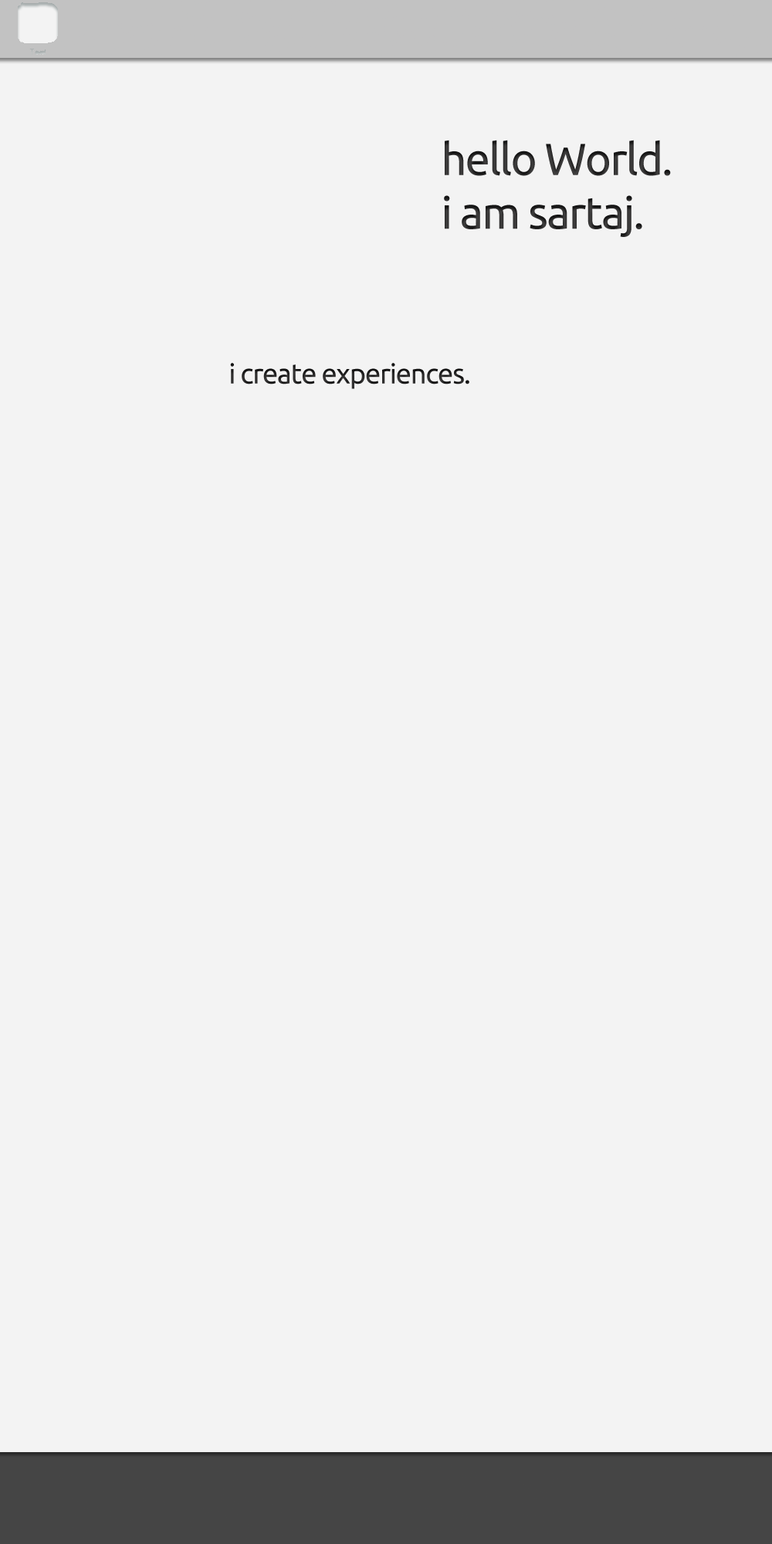
<style>
.page{position:relative;width:772px;height:1544px;background:#f3f3f3}
.page>*{position:absolute;margin:0}
.t1{font:44.8px "Ubuntu";letter-spacing:-0.03em;color:#414040}
.t2{font:27.8px "Ubuntu";letter-spacing:-0.03em;color:#212020}
</style>
<div class="page">
<p class="t1" style="left:444px;top:140px;width:227px;height:97px">hello World.<br>i am sartaj.</p>
<p class="t2" style="left:230px;top:363px;width:239px;height:26px">i create experiences.</p>
</div>
